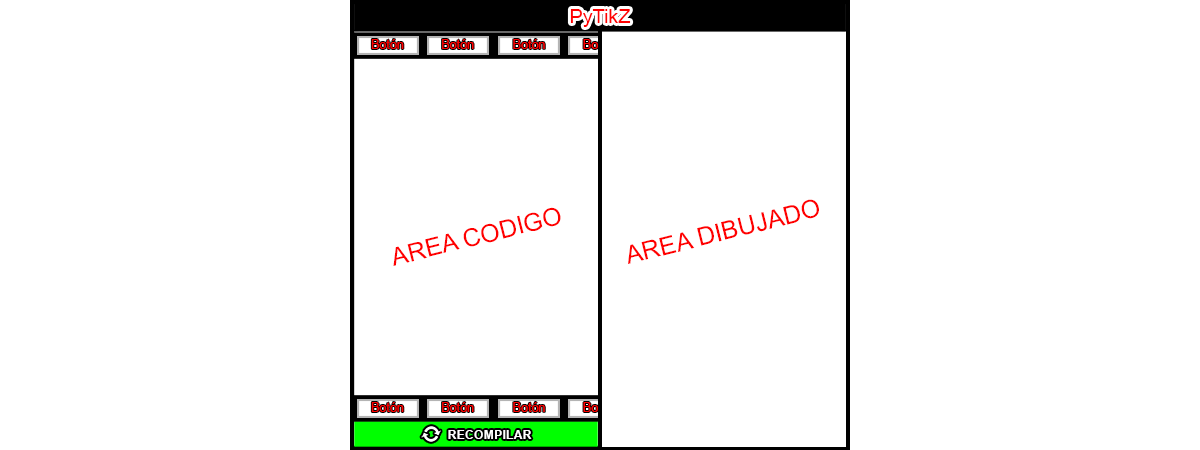
<style>
.page{position:relative;width:1200px;height:450px;background:#ffffff}
.page>*{position:absolute;margin:0}
.t1{font:19.4px "ArialMT";color:#ff0000}
.t2{font:12.5px "ArialMT";color:#ff0000}
.t3{font:24.8px "ArialMT";color:#ff0000}
.t4{font:25px "ArialMT";color:#ff0000}
.t5{font:12.5px "Arial-BoldMT";color:#ffffff}
</style>
<div class="page">
<p class="t1" style="left:570px;top:9px;width:61px;height:18px">PyTikZ</p>
<p class="t2" style="left:371px;top:39px;width:33px;height:10px">Botón</p>
<p class="t2" style="left:442px;top:39px;width:32px;height:10px">Botón</p>
<p class="t2" style="left:513px;top:39px;width:32px;height:10px">Botón</p>
<p class="t3" style="left:393px;top:207px;width:168px;height:59px;rotate:-14deg">AREA CODIGO</p>
<p class="t4" style="left:628px;top:199px;width:191px;height:65px;rotate:-14deg">AREA DIBUJADO</p>
<p class="t2" style="left:371px;top:402px;width:33px;height:10px">Botón</p>
<p class="t2" style="left:442px;top:402px;width:32px;height:10px">Botón</p>
<p class="t2" style="left:513px;top:402px;width:32px;height:10px">Botón</p>
<p class="t5" style="left:448px;top:430px;width:84px;height:9px">RECOMPILAR</p>
</div>
